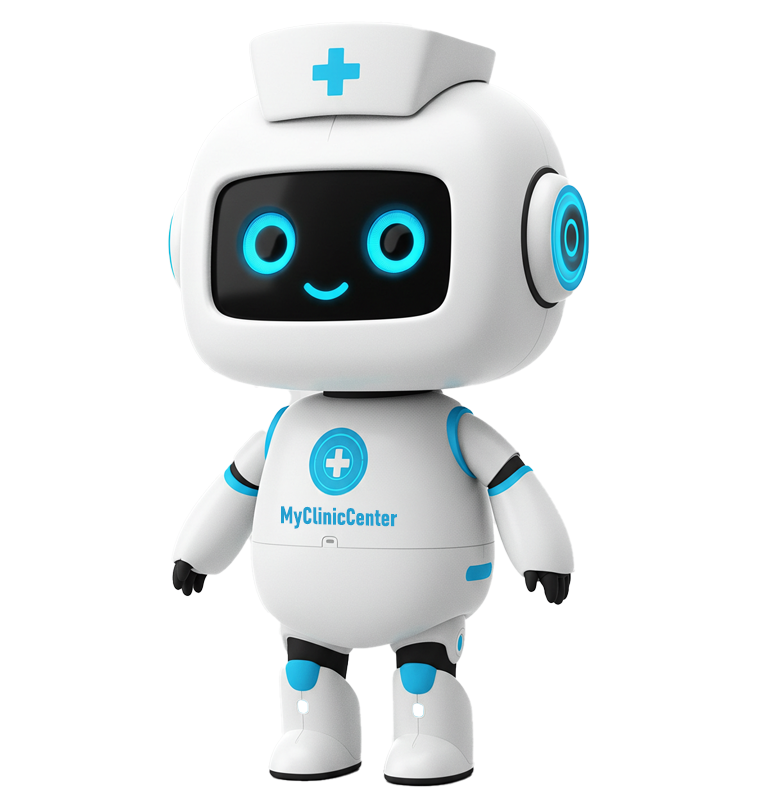
<style>
.page{position:relative;width:768px;height:808px;background:#ffffff}
.page>*{position:absolute;margin:0}
.t1{font:23.7px "Bahnschrift-BoldCondensed";color:#23a0d0}
</style>
<div class="page">
<p class="t1" style="left:281px;top:506px;width:116px;height:23px;rotate:2deg">MyClinicCenter</p>
</div>
